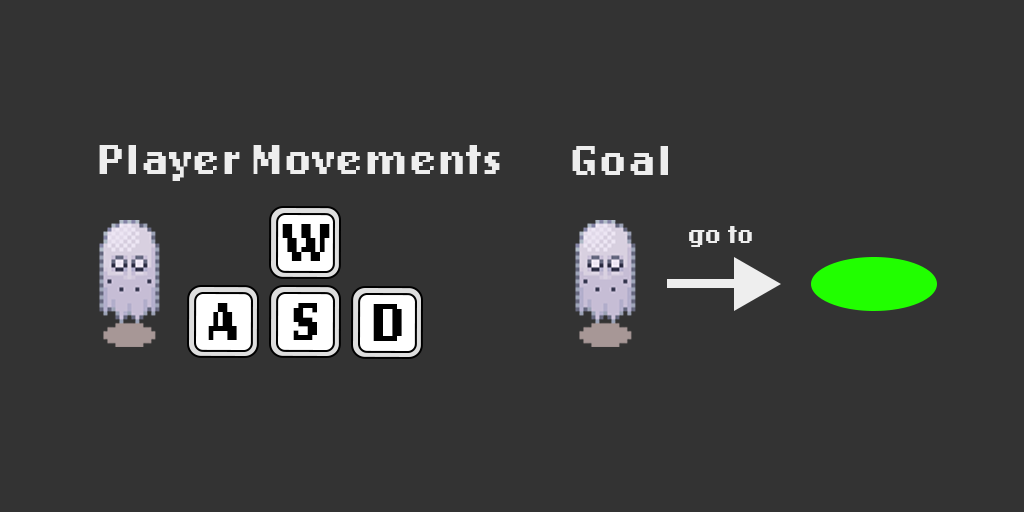
<style>
.page{position:relative;width:1024px;height:512px;background:#333333}
.page>*{position:absolute;margin:0}
.t1{font:44px "LoRes12OT-Bold";color:#eeeeee}
.t2{font:56px "LoRes12OT-Bold";color:#000000}
.t3{font:25.9px "LoRes12OT-Bold";color:#eeeeee}
</style>
<div class="page">
<p class="t1" style="left:99px;top:145px;width:401px;height:36px">Player Movements</p>
<p class="t1" style="left:572px;top:146px;width:96px;height:29px">Goal</p>
<p class="t2" style="left:282px;top:224px;width:48px;height:37px">W</p>
<p class="t3" style="left:689px;top:226px;width:63px;height:21px">go to</p>
<p class="t2" style="left:208px;top:303px;width:29px;height:37px">A</p>
<p class="t2" style="left:293px;top:303px;width:24px;height:37px">S</p>
<p class="t2" style="left:373px;top:304px;width:29px;height:37px">D</p>
</div>
